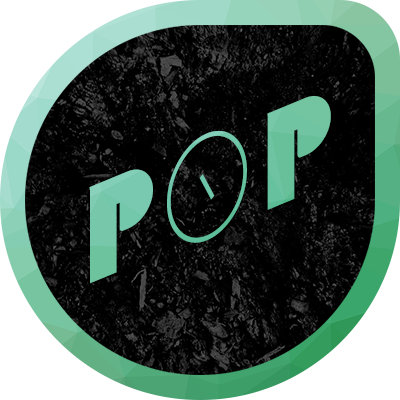
<style>
.page{position:relative;width:400px;height:400px;background:#000000}
.page>*{position:absolute;margin:0}
.t1{font:150px "NamskoutIn";color:#71c4a1;scale:0.82 1}
.t2{font:150px "Namskout";color:#71c4a1;scale:0.82 1}
</style>
<div class="page">
<p class="t1" style="left:89px;top:96px;width:242px;height:188px;rotate:-22deg">p<span class="t2">o</span>p</p>
</div>
